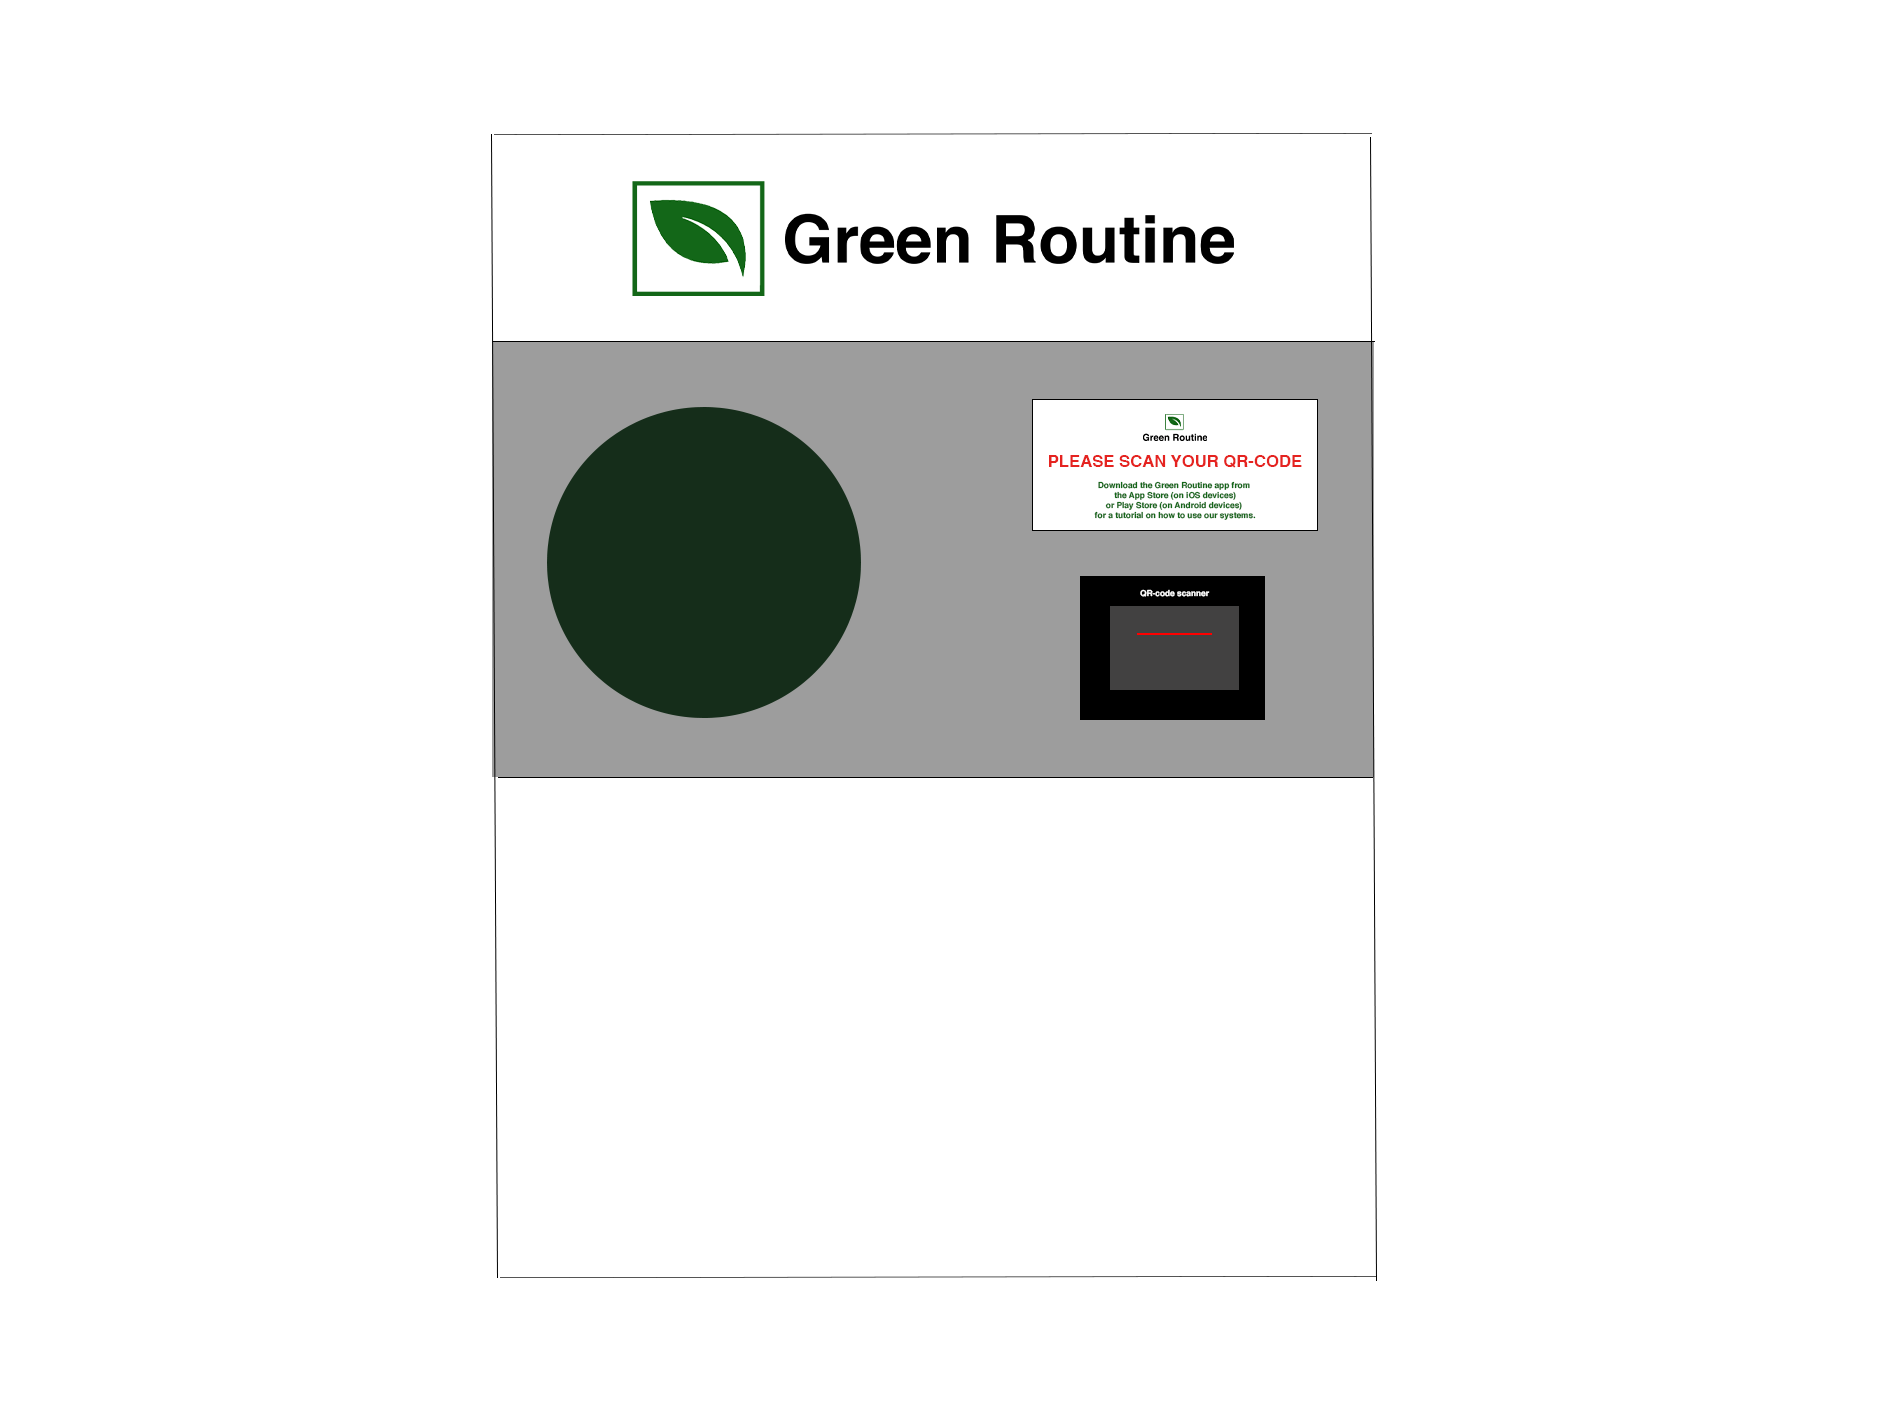
<style>
.page{position:relative;width:1890px;height:1417px;background:#ffffff}
.page>*{position:absolute;margin:0}
.t1{font:16.7px "Helvetica-Bold";color:#e52320}
.t2{font:8.3px "Helvetica-Bold";color:#136718}
.t3{font:8.3px "Helvetica-Bold";color:#ffffff}
</style>
<div class="page">
<p class="t1" style="left:1049px;top:455px;width:253px;height:13px">PLEASE SCAN YOUR QR-CODE</p>
<p class="t2" style="left:1094px;top:481px;width:162px;height:39px;text-align:center">Download the Green Routine app from <br>the App Store (on iOS devices)<br>or Play Store (on Android devices) <br>for a tutorial on how to use our systems.</p>
<p class="t3" style="left:1140px;top:589px;width:70px;height:8px">QR-code scanner</p>
</div>
